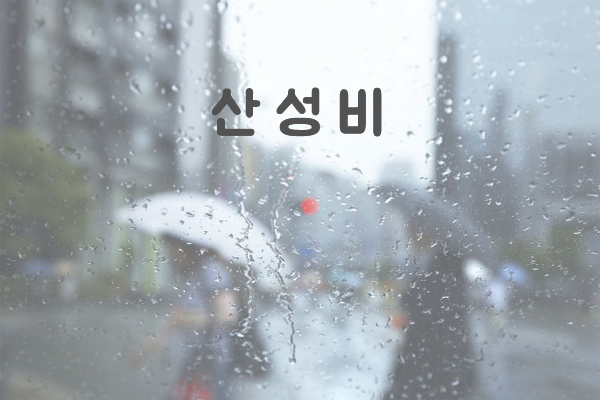
<style>
.page{position:relative;width:600px;height:400px}
.page>*{position:absolute;margin:0}
.t1{font:60px "BMJUA";color:#525252}
</style>
<div class="page">
<p class="t1" style="left:211px;top:87px;width:171px;height:50px">산 성 비</p>
</div>
